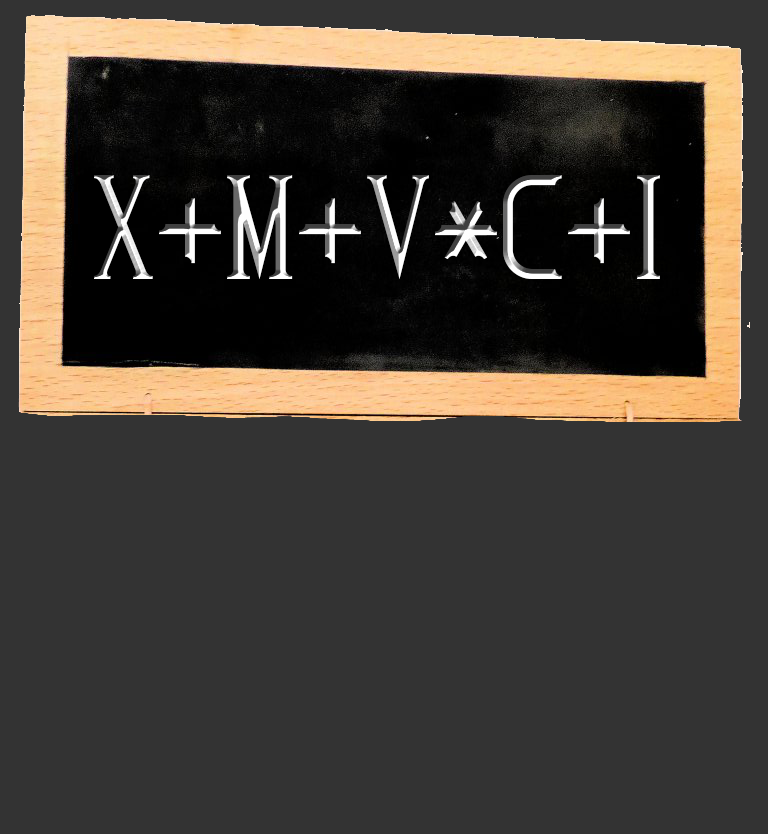
<style>
.page{position:relative;width:768px;height:834px;background:#333333}
.page>*{position:absolute;margin:0}
.t1{font:130px "RomanFont7"}
</style>
<div class="page">
<p class="t1" style="left:94px;top:175px;width:566px;height:104px">X+M+V*C+I</p>
</div>
